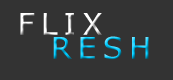
<style>
.page{position:relative;width:173px;height:80px;background:#333333}
.page>*{position:absolute;margin:0}
.t1{font:30px/24px "Verdana";letter-spacing:0.2em}
</style>
<div class="page">
<p class="t1" style="left:20px;top:13px;width:129px;height:47px">FLIX<br>  RESH</p>
</div>
